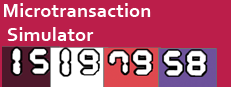
<style>
.page{position:relative;width:231px;height:87px;background:#bb1e4a}
.page>*{position:absolute;margin:0}
.t1{font:20.3px "Corbel-Bold";color:#ffffff}
</style>
<div class="page">
<p class="t1" style="left:4px;top:3px;width:147px;height:38px">Microtransaction<br> Simulator</p>
</div>
